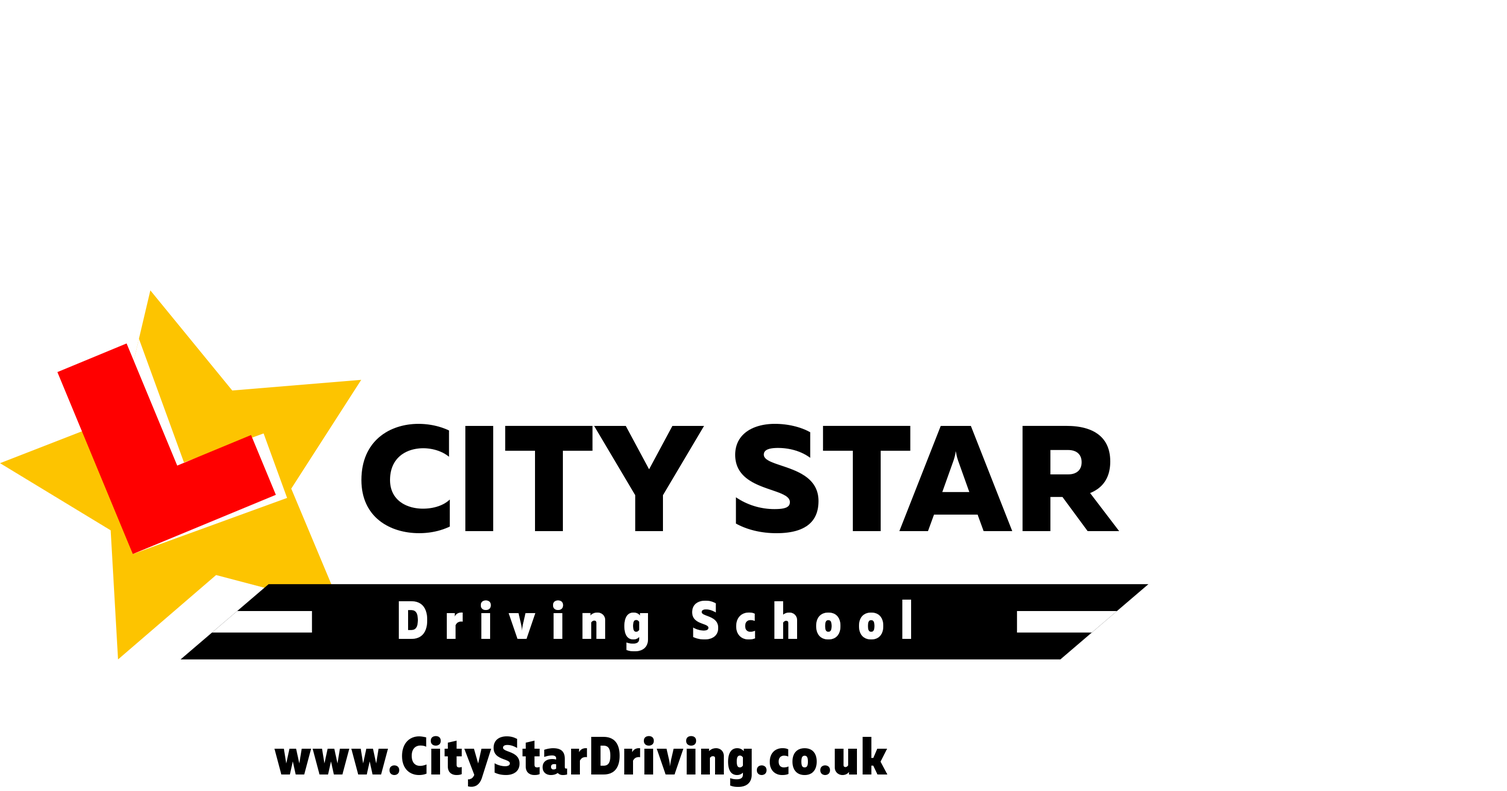
<style>
.page{position:relative;width:1507px;height:791px;background:#ffffff}
.page>*{position:absolute;margin:0}
.t1{font:150.5px "MullerDemo-ExtraBold";color:#000000}
.t2{font:53.7px "MullerNarrowDemo-ExtraBold";letter-spacing:0.3em;color:#ffffff}
.t3{font:53.7px "MullerNarrowDemo-ExtraBold";letter-spacing:0.025em;color:#000000}
</style>
<div class="page">
<p class="t1" style="left:361px;top:424px;width:758px;height:110px">CITY STAR</p>
<p class="t2" style="left:399px;top:599px;width:512px;height:53px">Driving School</p>
<p class="t3" style="left:274px;top:736px;width:613px;height:51px">www.CityStarDriving.co.uk</p>
</div>
